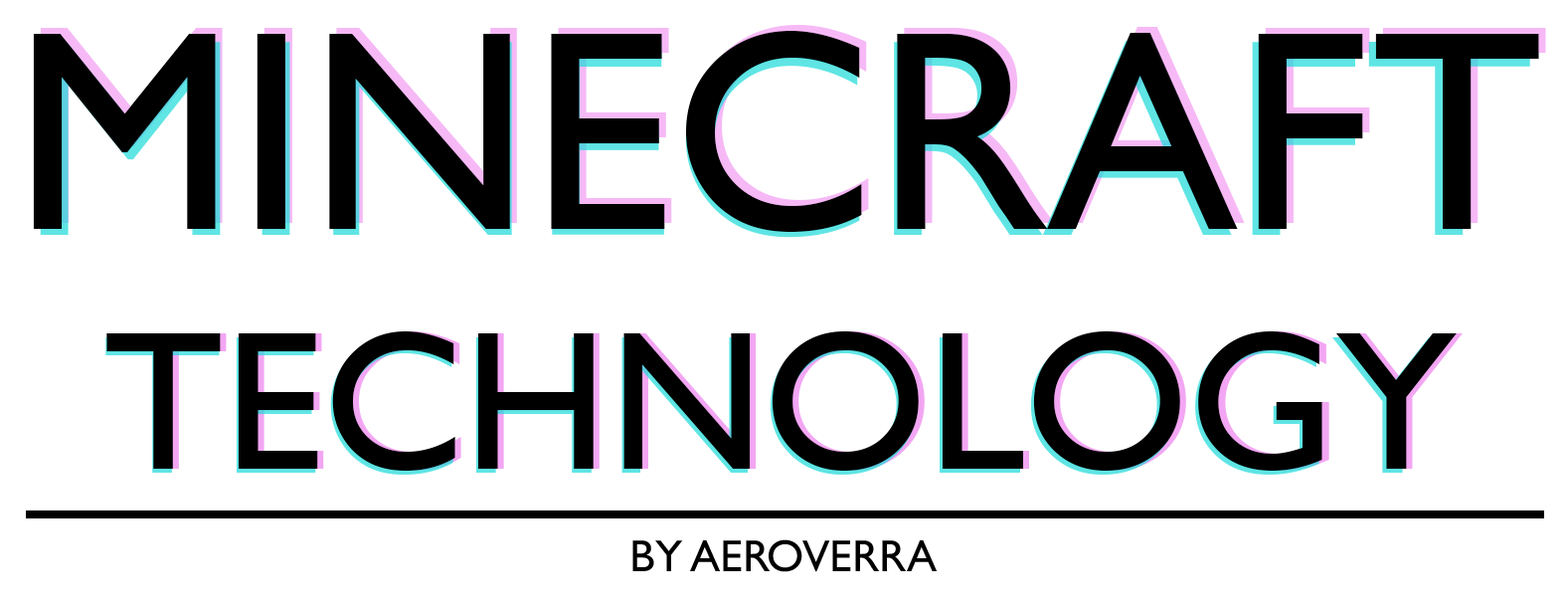
<style>
.page{position:relative;width:1568px;height:609px;background:#ffffff}
.page>*{position:absolute;margin:0}
.t1{font:285.4px "GillSansMT";color:#000000}
.t2{font:198.9px "GillSansMT";color:#000000}
.t3{font:45px "GillSansMT";color:#000000}
</style>
<div class="page">
<p class="t1" style="left:40px;top:25px;width:1506px;height:201px">MINECRAFT</p>
<p class="t1" style="left:33px;top:31px;width:1506px;height:201px">MINECRAFT</p>
<p class="t2" style="left:106px;top:331px;width:1351px;height:139px">TECHNOLOGY</p>
<p class="t2" style="left:112px;top:331px;width:1351px;height:139px">TECHNOLOGY</p>
<p class="t3" style="left:632px;top:539px;width:305px;height:33px">BY AEROVERRA</p>
</div>
